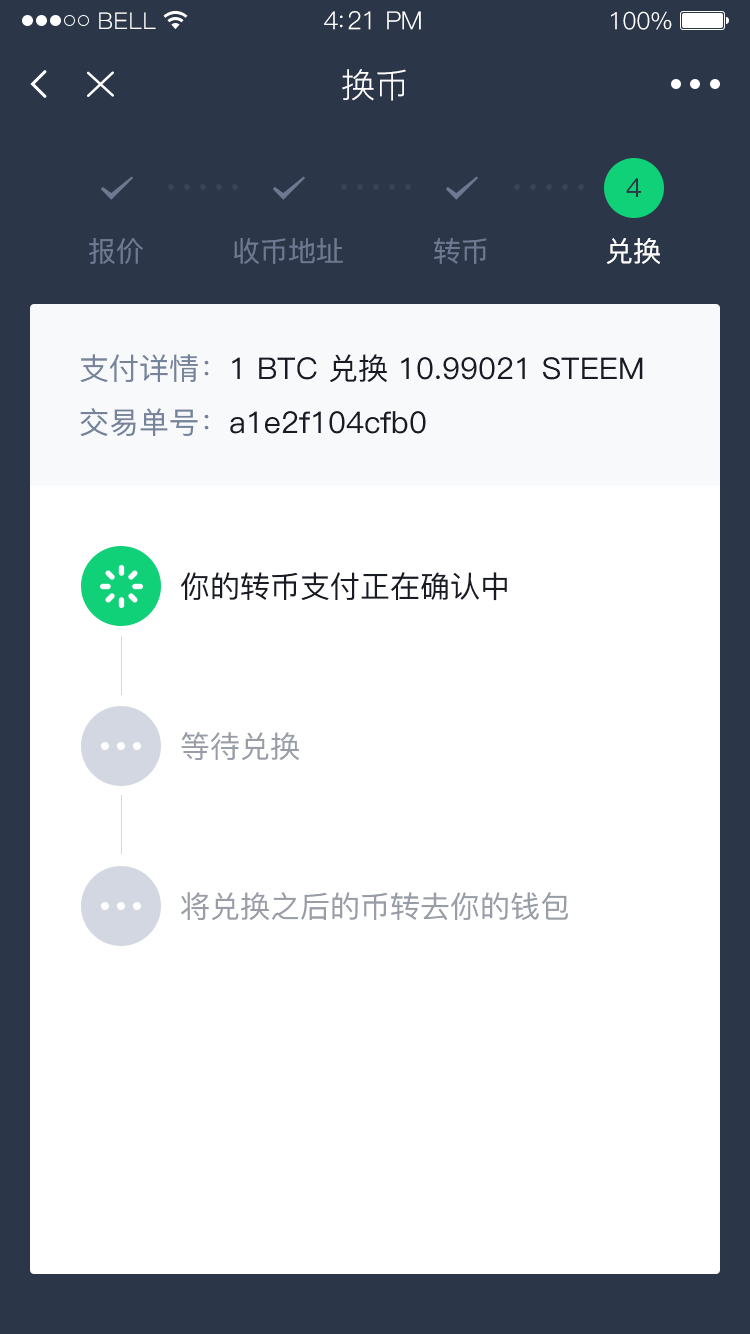
<style>
.page{position:relative;width:750px;height:1334px;background:#ffffff}
.page>*{position:absolute;margin:0}
.t1{font:23px "PingFang-SC-Regular";letter-spacing:0.02em;color:#ffffff}
.t2{font:25px "PingFang-SC-Regular";letter-spacing:-0.02em;color:#ffffff}
.t3{font:24px "PingFang-SC-Regular";letter-spacing:-0.02em;color:#ffffff}
.t4{font:34px "PingFang-SC-Regular";color:#ffffff}
.t5{font:26px "PingFang-SC-Medium";color:#2b3749}
.t6{font:28px "PingFang-SC-Medium";color:#6e7991}
.t7{font:28px "PingFang-SC-Medium";color:#ffffff}
.t8{font:30px/54px "PingFang-SC-Medium";color:#181b23}
.t9{font:30px/54px "PingFang-SC-Medium";color:#76839b}
.t10{font:30px "PingFang-SC-Medium";color:#181b23}
.t11{font:30px "PingFang-SC-Medium";color:#999da7}
</style>
<div class="page">
<p class="t1" style="left:99px;top:12px;width:57px;height:17px">BELL</p>
<p class="t2" style="left:324px;top:11px;width:97px;height:19px">4:21 PM</p>
<p class="t3" style="left:611px;top:11px;width:61px;height:19px">100%</p>
<p class="t4" style="left:342px;top:69px;width:64px;height:32px">换币</p>
<p class="t5" style="left:626px;top:178px;width:15px;height:19px">4</p>
<p class="t6" style="left:89px;top:238px;width:54px;height:26px">报价</p>
<p class="t6" style="left:234px;top:238px;width:109px;height:26px">收币地址</p>
<p class="t6" style="left:434px;top:238px;width:53px;height:26px">转币</p>
<p class="t7" style="left:606px;top:238px;width:54px;height:26px">兑换</p>
<p class="t8" style="left:80px;top:354px;width:563px;height:82px"><span class="t9">支付详情：</span>1 BTC 兑换 10.99021 STEEM<br><span class="t9">交易单号：</span>a1e2f104cfb0</p>
<p class="t10" style="left:181px;top:572px;width:326px;height:29px">你的转币支付正在确认中</p>
<p class="t11" style="left:181px;top:732px;width:118px;height:28px">等待兑换</p>
<p class="t11" style="left:181px;top:892px;width:387px;height:28px">将兑换之后的币转去你的钱包</p>
</div>
